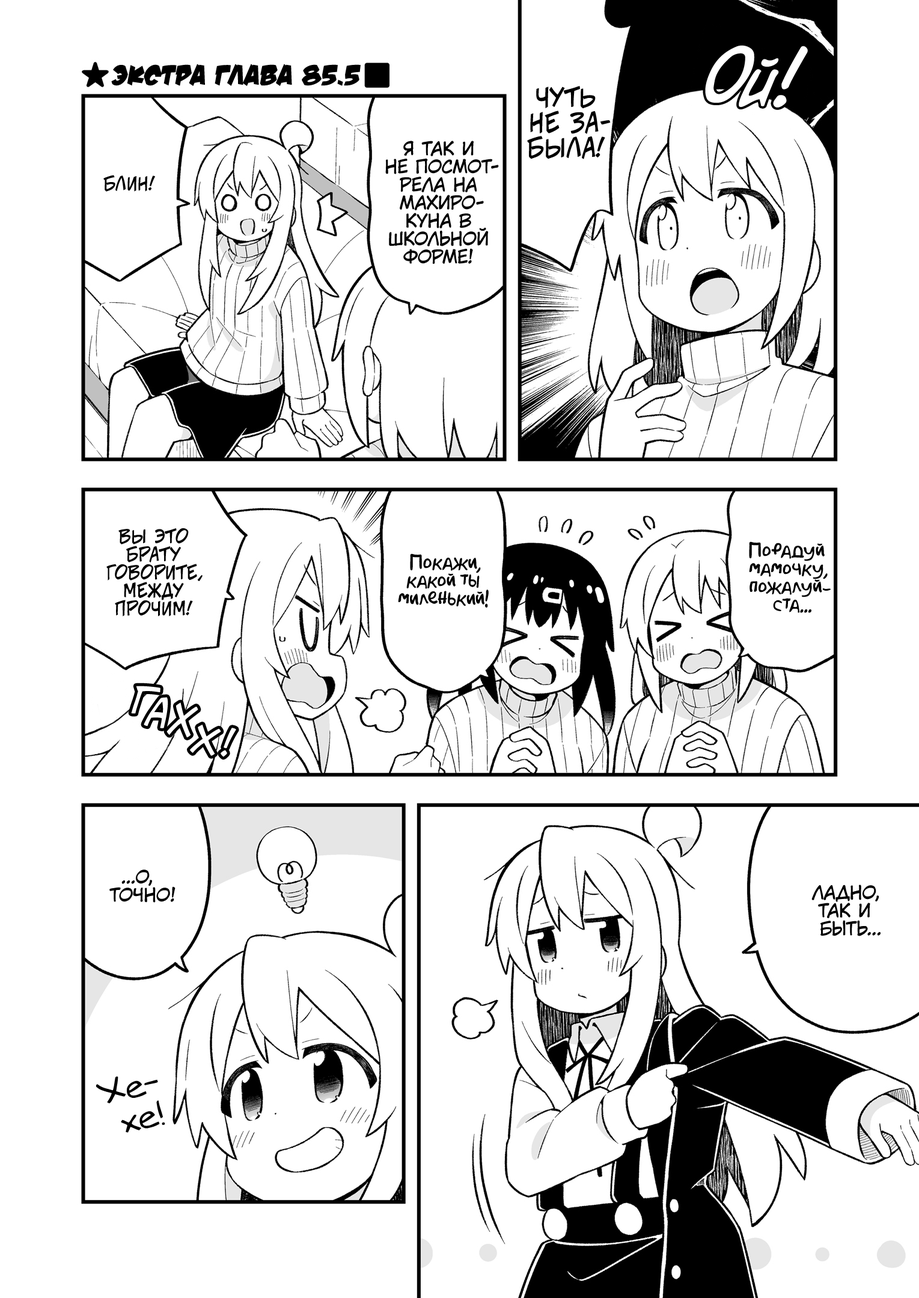
<style>
.page{position:relative;width:919px;height:1298px;background:#ffffff}
.page>*{position:absolute;margin:0}
.t1{font:72.1px "v_CCDearDiary";color:#ffffff}
.t2{font:28.8px "v_DamnNoisyKids";color:#000000;text-transform:uppercase}
.t3{font:25.2px "v_CCJeffCampbell";color:#000000;text-transform:uppercase}
.t4{font:18px "KuraiVoice2";color:#000000;text-transform:uppercase}
.t5{font:18px "v_CCJeffCampbell";color:#000000;text-transform:uppercase}
.t6{font:18px "AkbarPlain";color:#000000}
.t7{font:37.9px "v_CCJeffCampbell";color:#ffffff;scale:1.1 1}
.t8{font:39.7px "v_CCJeffCampbell";color:#ffffff;scale:0.91 1}
.t9{font:41.1px "v_CCJeffCampbell";color:#ffffff;scale:0.83 1}
.t10{font:36.1px "v_CCJeffCampbell";color:#ffffff}
.t11{font:32.4px "v_Augie";color:#000000}
</style>
<div class="page">
<p class="t1" style="left:705px;top:45px;width:103px;height:63px;rotate:5deg">Ой!</p>
<p class="t2" style="left:111px;top:64px;width:250px;height:22px">Экстра глава 85.5</p>
<p class="t3" style="left:527px;top:86px;width:83px;height:73px;text-align:center">Чуть<br>не за-<br>была!</p>
<p class="t4" style="left:385px;top:141px;width:114px;height:123px;text-align:center">Я так и<br>не посмот-<br>рела на<br>Махиро-<br>куна в<br>школьной<br>форме!</p>
<p class="t5" style="left:103px;top:175px;width:52px;height:17px">Блин!</p>
<p class="t5" style="left:106px;top:528px;width:96px;height:89px;text-align:center">Вы это<br>брату<br>говорите,<br>между<br>прочим!</p>
<p class="t6" style="left:749px;top:541px;width:82px;height:72px;text-align:center">Порадуй<br>мамочку,<br>пожалуй-<br>ста...</p>
<p class="t6" style="left:398px;top:553px;width:91px;height:54px;text-align:center">Покажи,<br>какой ты<br>миленький!</p>
<p class="t7" style="left:131px;top:686px;width:29px;height:28px;rotate:16deg">г</p>
<p class="t8" style="left:144px;top:697px;width:24px;height:31px;rotate:17deg">а</p>
<p class="t9" style="left:166px;top:702px;width:32px;height:35px;rotate:16deg">х</p>
<p class="t10" style="left:189px;top:724px;width:32px;height:32px;rotate:15deg">х</p>
<p class="t10" style="left:221px;top:728px;width:15px;height:29px;rotate:5deg">!</p>
<p class="t4" style="left:109px;top:869px;width:66px;height:34px;text-align:center">...О,<br>точно!</p>
<p class="t4" style="left:811px;top:884px;width:69px;height:52px;text-align:center">Ладно,<br>так и<br>быть...</p>
<p class="t11" style="left:96px;top:1076px;width:69px;height:57px;text-align:center;rotate:-13deg">Хе-<br>хе!</p>
</div>
